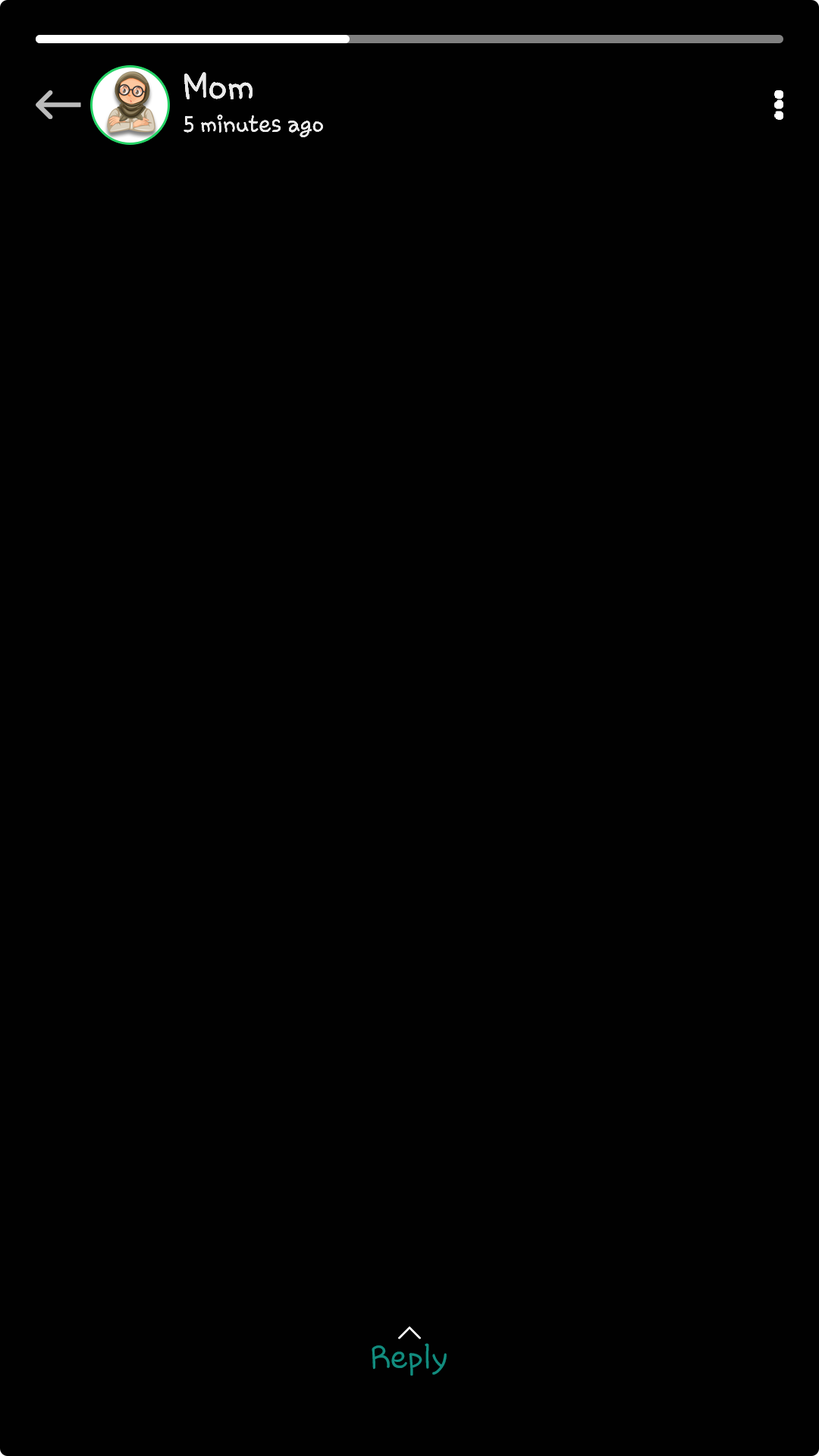
<style>
.page{position:relative;width:819px;height:1456px;background:#010101}
.page>*{position:absolute;margin:0}
.t1{font:37.9px "Chococooky";color:#ebebeb}
.t2{font:23px "Chococooky";color:#ebebeb}
.t3{font:32.4px "Chococooky";color:#128c7e}
</style>
<div class="page">
<p class="t1" style="left:184px;top:72px;width:69px;height:27px">Mom</p>
<p class="t1" style="left:184px;top:72px;width:69px;height:27px">Mom</p>
<p class="t1" style="left:184px;top:72px;width:69px;height:27px">Mom</p>
<p class="t2" style="left:184px;top:115px;width:139px;height:22px">5 minutes ago</p>
<p class="t2" style="left:184px;top:115px;width:139px;height:22px">5 minutes ago</p>
<p class="t2" style="left:184px;top:115px;width:139px;height:22px">5 minutes ago</p>
<p class="t3" style="left:372px;top:1343px;width:75px;height:33px">Reply</p>
</div>
